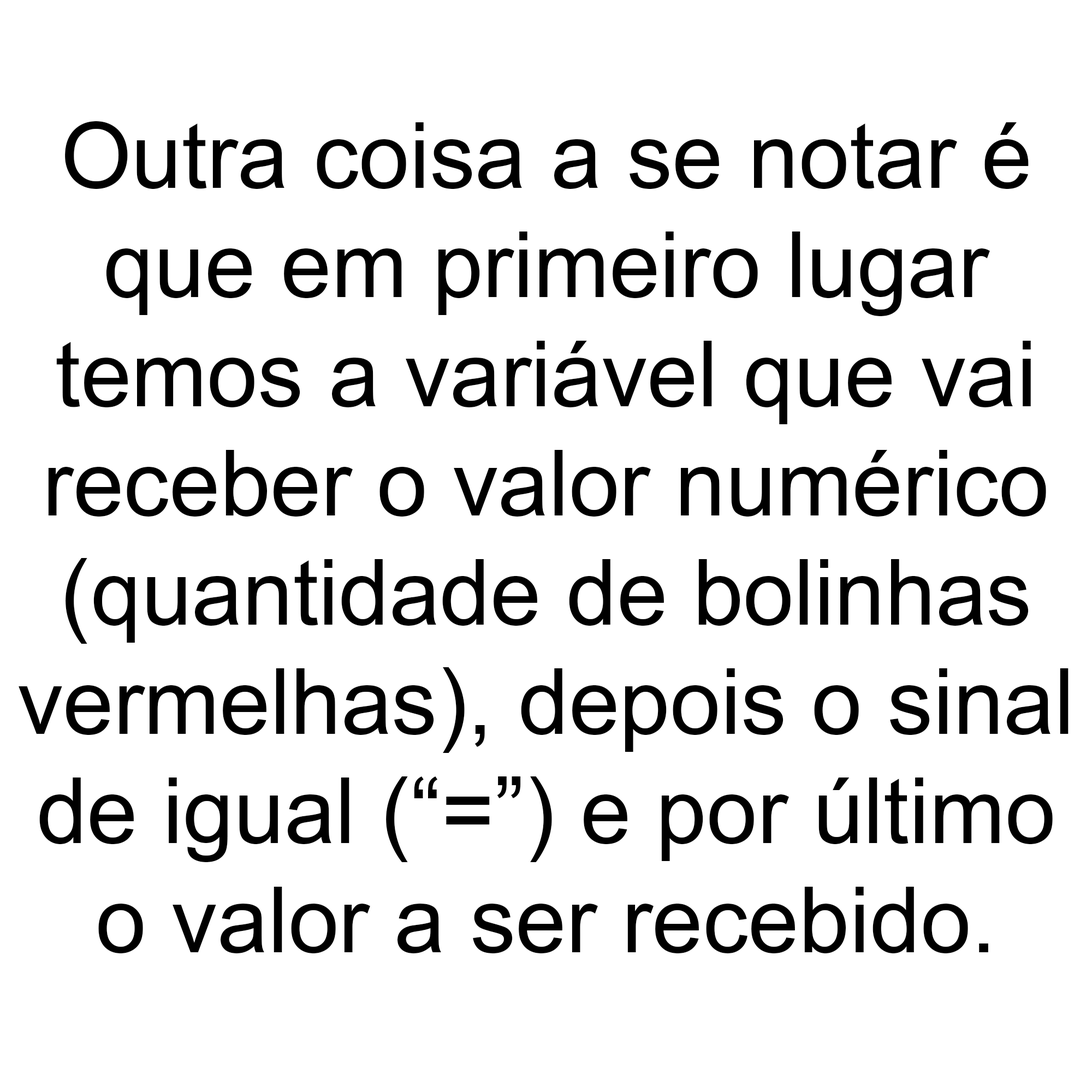
<style>
.page{position:relative;width:1092px;height:1092px;background:#ffffff}
.page>*{position:absolute;margin:0}
.t1{font:91px "ArialMT";color:#000000}
</style>
<div class="page">
<p class="t1" style="left:19px;top:121px;width:1050px;height:832px;text-align:center">Outra coisa a se notar é<br>que em primeiro lugar<br>temos a variável que vai<br>receber o valor numérico<br>(quantidade de bolinhas<br>vermelhas), depois o sinal<br>de igual (“=”) e por último<br>o valor a ser recebido.</p>
</div>
